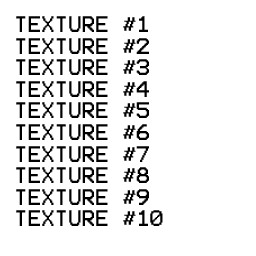
<style>
.page{position:relative;width:256px;height:256px;background:#ffffff}
.page>*{position:absolute;margin:0}
.t1{font:18px "Terminal";color:#000000}
</style>
<div class="page">
<p class="t1" style="left:16px;top:16px;width:147px;height:210px">TEXTURE #1<br>TEXTURE #2<br>TEXTURE #3<br>TEXTURE #4<br>TEXTURE #5<br>TEXTURE #6<br>TEXTURE #7<br>TEXTURE #8<br>TEXTURE #9<br>TEXTURE #10</p>
</div>
